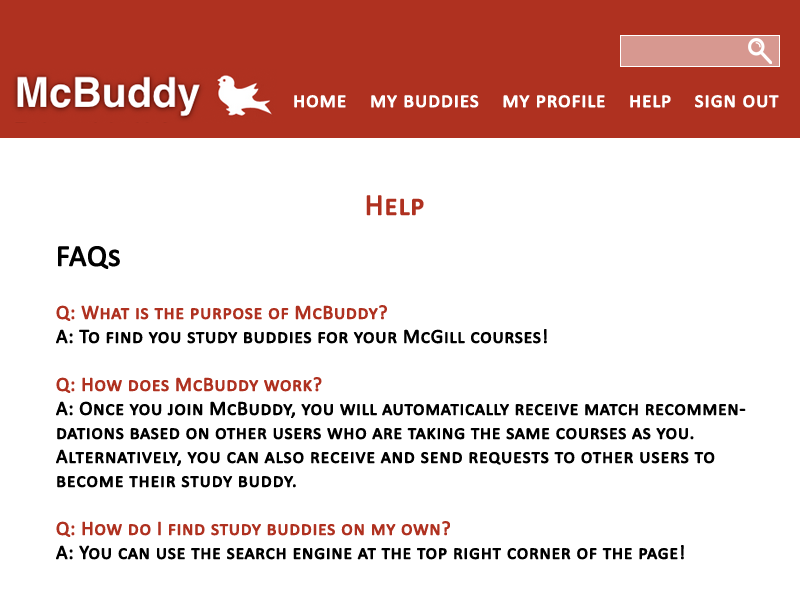
<style>
.page{position:relative;width:800px;height:600px;background:#ffffff}
.page>*{position:absolute;margin:0}
.t1{font:22px "Calibri";letter-spacing:0.005em;color:#ffffff;font-variant:small-caps;font-weight:bold}
.t2{font:30px "Calibri";letter-spacing:0.005em;color:#af3120;font-variant:small-caps;font-weight:bold}
.t3{font:30px "Calibri";letter-spacing:0.005em;color:#000000;font-variant:small-caps;font-weight:bold}
.t4{font:20px "Calibri";letter-spacing:0.005em;color:#000000;font-variant:small-caps;font-weight:bold}
.t5{font:20px "Calibri";letter-spacing:0.005em;color:#af3120;font-variant:small-caps;font-weight:bold}
</style>
<div class="page">
<p class="t1" style="left:294px;top:95px;width:485px;height:13px">home    my buddies    my profile    help    sign out</p>
<p class="t2" style="left:366px;top:195px;width:58px;height:21px">Help</p>
<p class="t3" style="left:58px;top:246px;width:62px;height:23px">FAQs</p>
<p class="t4" style="left:56px;top:305px;width:690px;height:255px"><span class="t5">Q: What is the purpose of McBuddy?<br></span>A: To find you study buddies for your McGill courses! <br><br><span class="t5">Q: How does McBuddy work?<br></span>A: Once you join McBuddy, you will automatically receive match recommendations based on other users who are taking the same courses as you.<br>Alternatively, you can also receive and send requests to other users to become their study buddy.<br><br><span class="t5">Q: How do I find study buddies on my own?<br></span>A: You can use the search engine at the top right corner of the page!</p>
</div>
